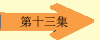
<style>
.page{position:relative;width:100px;height:40px;background:#fffccc}
.page>*{position:absolute;margin:0}
.t1{font:12px "SimSun"}
</style>
<div class="page">
<p class="t1" style="left:20px;top:16px;width:48px;height:12px">第十三集</p>
</div>
